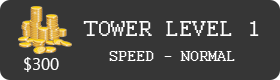
<style>
.page{position:relative;width:280px;height:80px;background:#363636}
.page>*{position:absolute;margin:0}
.t1{font:16px/25px "Courier";color:#ffffff}
.t2{font:24px/25px "Courier";color:#ffffff}
</style>
<div class="page">
<p class="t1" style="left:83px;top:21px;width:176px;height:40px;text-align:center"><span class="t2">TOWER LEVEL 1<br></span>SPEED - NORMAL</p>
</div>
